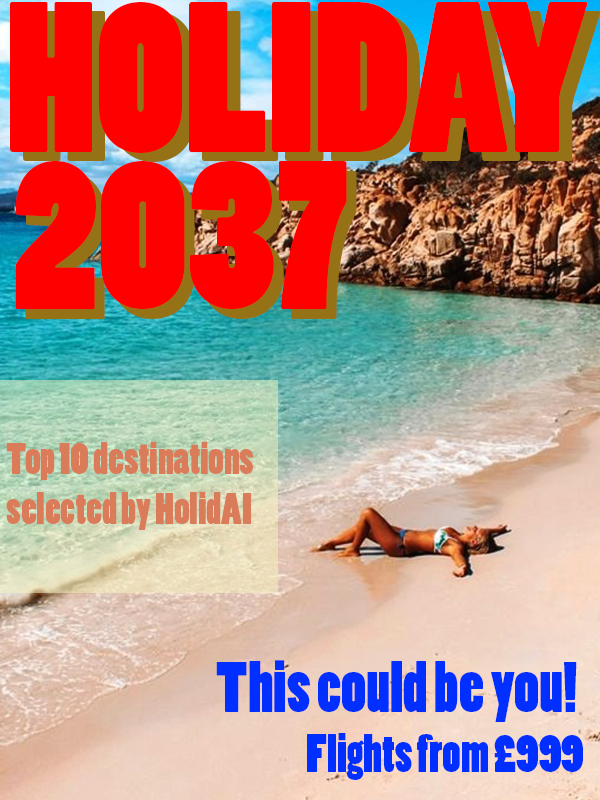
<style>
.page{position:relative;width:600px;height:800px;background:#ff0000}
.page>*{position:absolute;margin:0}
.t1{font:200px "PoplarStd";color:#ff0000}
.t2{font:41.7px "PoplarStd";color:#da7b5a}
.t3{font:66.7px "PoplarStd";color:#002fff}
.t4{font:50px "PoplarStd";color:#002fff}
</style>
<div class="page">
<p class="t1" style="left:10px;top:2px;width:578px;height:151px">HOLIDAY</p>
<p class="t1" style="left:23px;top:11px;width:578px;height:151px">HOLIDAY</p>
<p class="t1" style="left:15px;top:161px;width:332px;height:149px">2037</p>
<p class="t1" style="left:25px;top:171px;width:332px;height:149px">2037</p>
<p class="t2" style="left:6px;top:441px;width:247px;height:89px">Top 10 destinations<br>selected by HolidAI</p>
<p class="t3" style="left:216px;top:660px;width:367px;height:120px;text-align:right">This could be you! <br><span class="t4">Flights from £999</span></p>
</div>
